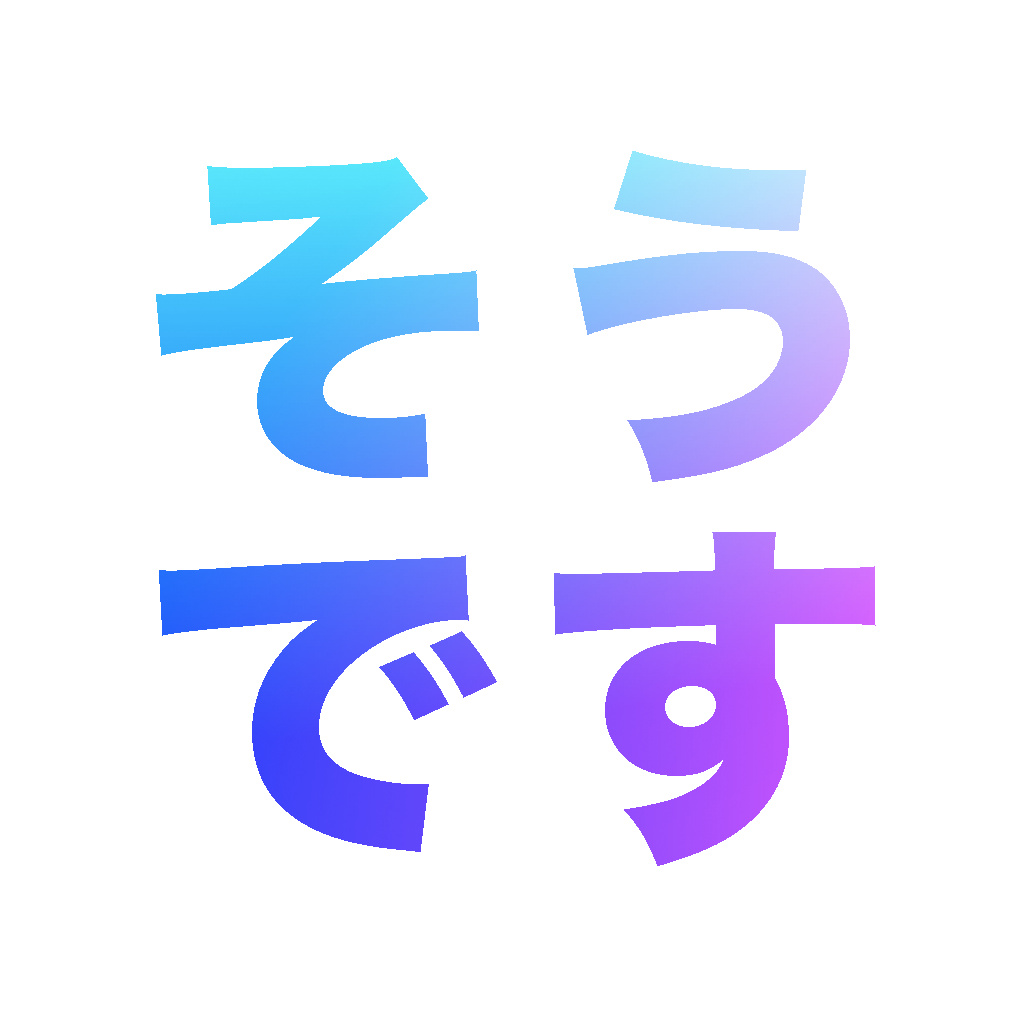
<style>
.page{position:relative;width:1024px;height:1024px;background:#ffffff}
.page>*{position:absolute;margin:0}
.t1{font:360px/380px "HiraKakuStd-W8";letter-spacing:0.1em}
</style>
<div class="page">
<p class="t1" style="left:156px;top:151px;width:720px;height:715px">そう<br>です</p>
</div>
